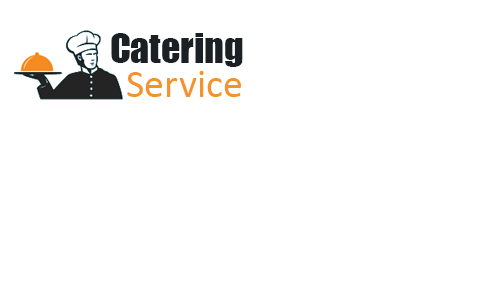
<style>
.page{position:relative;width:500px;height:300px;background:#ffffff}
.page>*{position:absolute;margin:0}
.t1{font:37.7px "Impact";color:#1b2024}
.t2{font:40.3px "Calibri";color:#f6922a}
</style>
<div class="page">
<p class="t1" style="left:111px;top:33px;width:132px;height:34px">Catering</p>
<p class="t2" style="left:127px;top:71px;width:114px;height:26px">Service</p>
</div>
